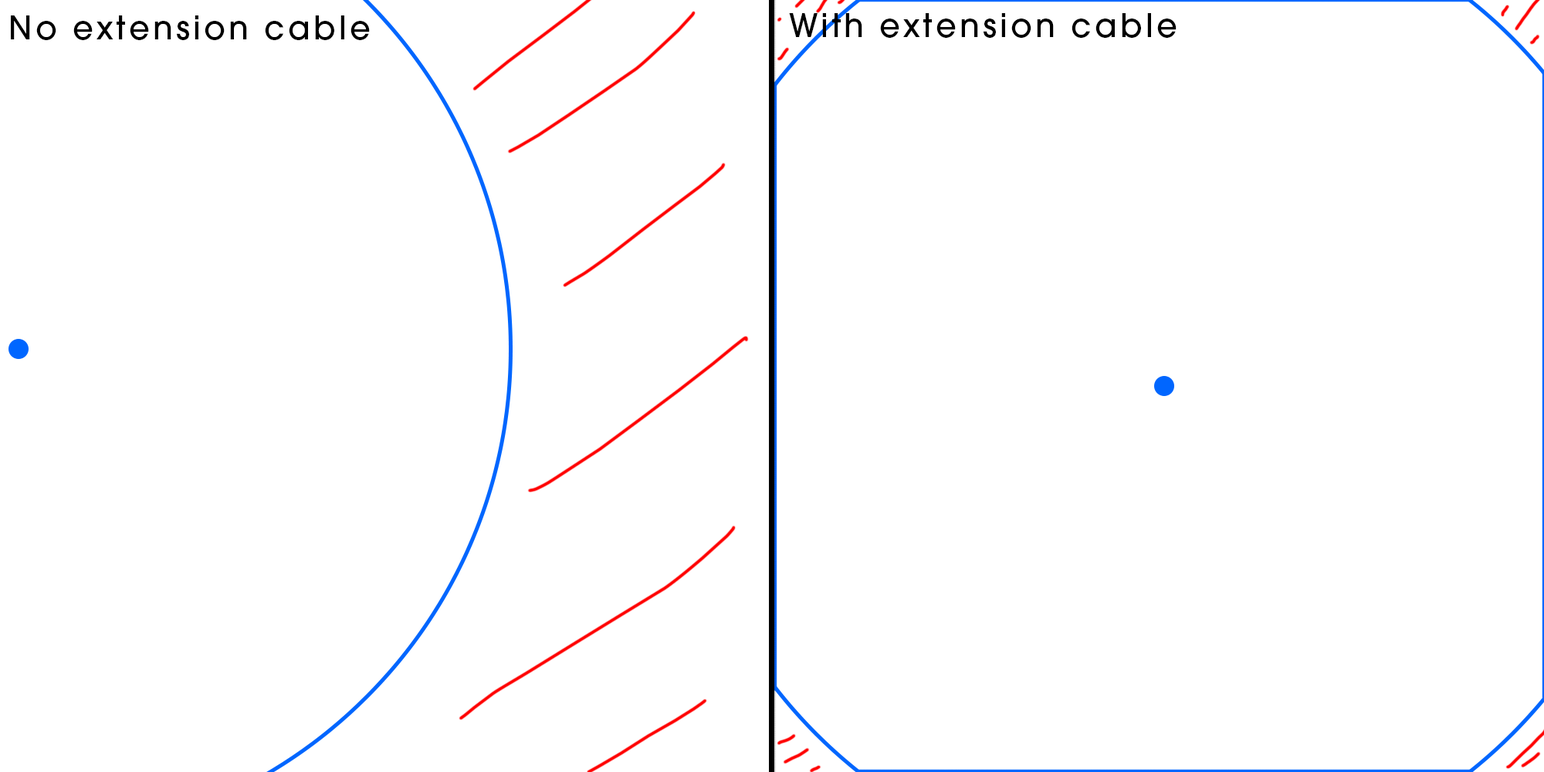
<style>
.page{position:relative;width:1544px;height:772px;background:#ffffff}
.page>*{position:absolute;margin:0}
.t1{font:32.3px "AvantGarde-Medium";letter-spacing:0.1em;color:#000000}
</style>
<div class="page">
<p class="t1" style="left:11px;top:15px;width:359px;height:25px">No extension cable</p>
<p class="t1" style="left:789px;top:13px;width:388px;height:25px">With extension cable</p>
</div>
